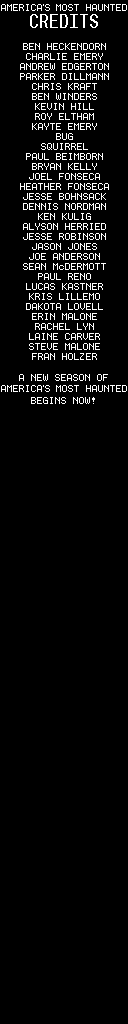
<style>
.page{position:relative;width:128px;height:1024px;background:#000000}
.page>*{position:absolute;margin:0}
.t1{font:18px "Terminal";color:#ffffff}
.t2{font:8px/10px "Terminal";color:#ffffff}
.t3{font:8px "Terminal";color:#ffffff}
</style>
<div class="page">
<p class="t1" style="left:30px;top:14px;width:68px;height:14px">CREDITS</p>
<p class="t2" style="left:20px;top:43px;width:89px;height:317px;text-align:center">BEN HECKENDORN<br>CHARLIE EMERY<br>ANDREW EDGERTON<br>PARKER DILLMANN<br>CHRIS KRAFT<br>BEN WINDERS<br>KEVIN HILL<br>ROY ELTHAM<br>KAYTE EMERY<br>BUG<br>SQUIRREL<br>PAUL BEIMBORN<br>BRYAN KELLY<br>JOEL FONSECA<br>HEATHER FONSECA<br>JESSE BOHNSACK<br>DENNIS NORDMAN<br>KEN KULIG<br>ALYSON HERRIED<br>JESSE ROBINSON<br>JASON JONES<br>JOE ANDERSON<br>SEAN McDERMOTT<br>PAUL RENO<br>LUCAS KASTNER<br>KRIS LILLEMO<br>DAKOTA LOVELL<br>ERIN MALONE<br>RACHEL LYN<br>LAINE CARVER<br>STEVE MALONE<br>FRAN HOLZER</p>
<p class="t3" style="left:19px;top:374px;width:89px;height:7px">A NEW SEASON OF</p>
<p class="t3" style="left:31px;top:397px;width:64px;height:7px">BEGINS NOW!</p>
</div>
